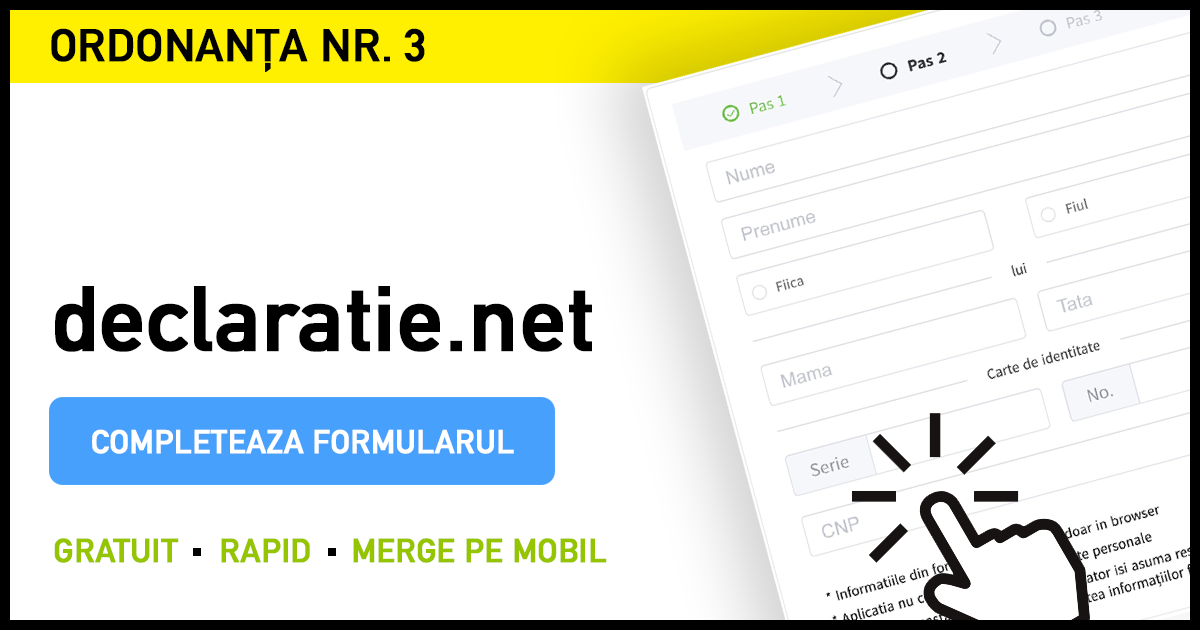
<style>
.page{position:relative;width:1200px;height:630px;background:#ffffff}
.page>*{position:absolute;margin:0}
.t1{font:44.9px "DINAlternate-Bold";color:#000000;font-weight:bold}
.t2{font:90px "DINAlternate-Bold";color:#000000;font-weight:bold}
.t3{font:32.4px "DINAlternate-Bold";color:#ffffff;font-weight:bold}
.t4{font:33.1px "DINAlternate-Bold";color:#94c500;font-weight:bold}
</style>
<div class="page">
<p class="t1" style="left:51px;top:28px;width:374px;height:44px">ORDONANȚA NR. 3</p>
<p class="t2" style="left:55px;top:286px;width:537px;height:66px">declaratie.net</p>
<p class="t3" style="left:92px;top:429px;width:422px;height:25px">COMPLETEAZA FORMULARUL</p>
<p class="t4" style="left:54px;top:538px;width:125px;height:25px">GRATUIT</p>
<p class="t4" style="left:221px;top:538px;width:89px;height:25px">RAPID</p>
<p class="t4" style="left:353px;top:538px;width:254px;height:25px">MERGE PE MOBIL</p>
</div>
